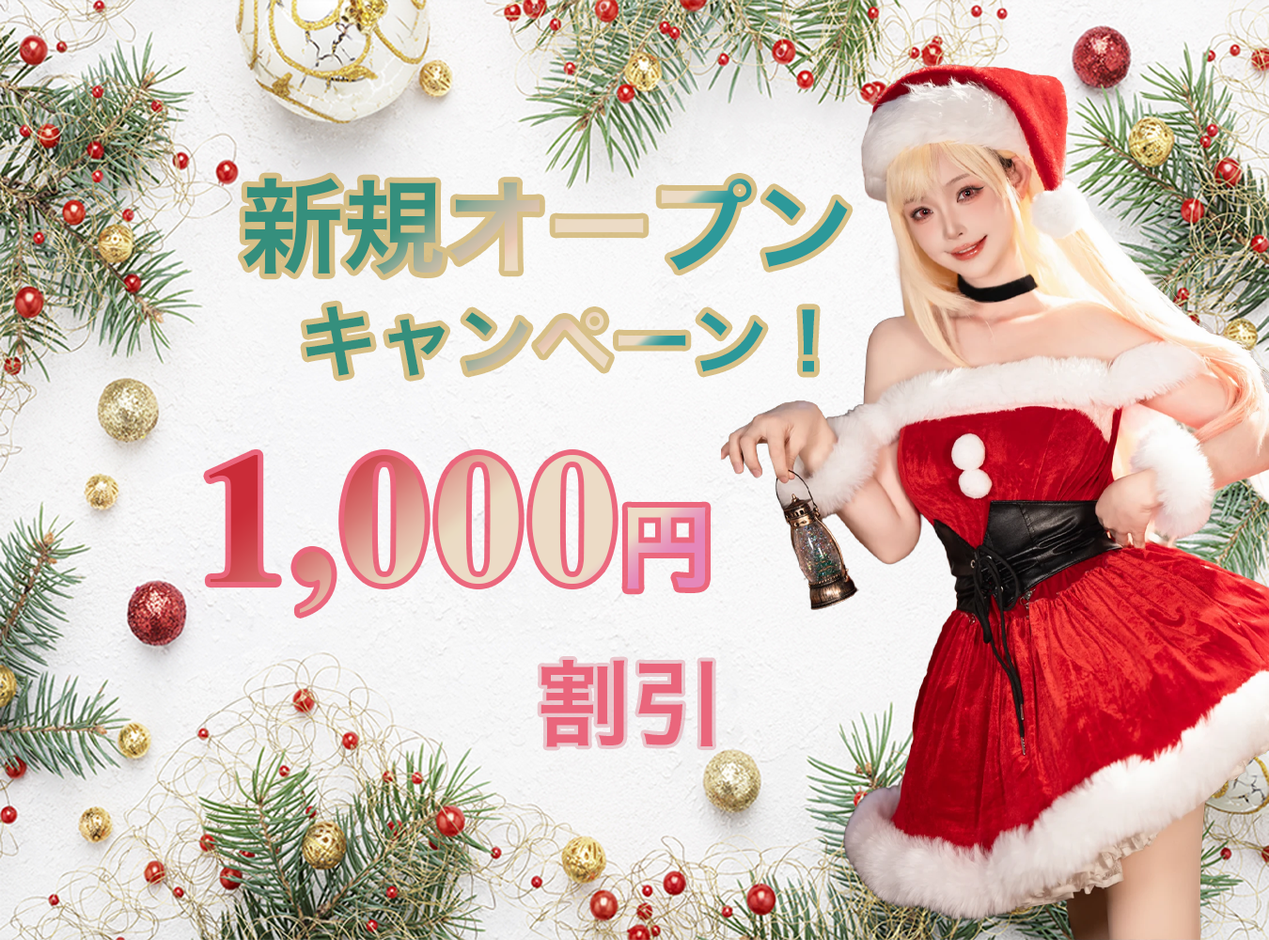
<style>
.page{position:relative;width:1269px;height:940px}
.page>*{position:absolute;margin:0}
.t1{font:102.5px "HiraKakuPro-W6"}
.t2{font:78.3px "HiraKakuPro-W6"}
.t3{font:188px "TimesNewRomanPS-BoldMT"}
.t4{font:94px "HiraKakuPro-W6"}
.t5{font:94px "HiraKakuPro-W6";color:#ea667c}
</style>
<div class="page">
<p class="t1" style="left:242px;top:178px;width:606px;height:97px">新規オープン</p>
<p class="t2" style="left:305px;top:305px;width:510px;height:71px">キャンペーン！</p>
<p class="t3" style="left:209px;top:455px;width:497px;height:158px">1,000<span class="t4">円</span></p>
<p class="t5" style="left:540px;top:660px;width:172px;height:87px">割引</p>
</div>
